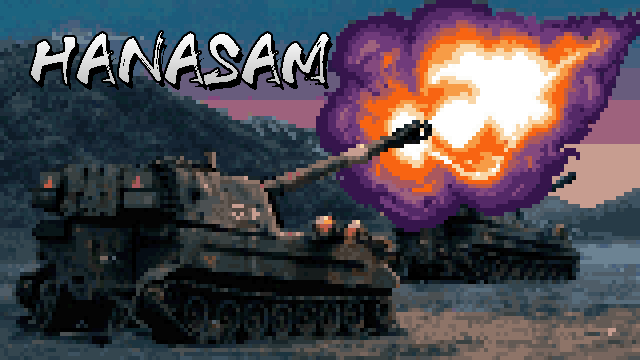
<style>
.page{position:relative;width:640px;height:360px}
.page>*{position:absolute;margin:0}
.t1{font:63.9px "HOT-NinjaStd-R";color:#e0e0e0;text-transform:uppercase}
</style>
<div class="page">
<p class="t1" style="left:31px;top:32px;width:298px;height:53px">hanasam</p>
</div>
